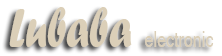
<style>
.page{position:relative;width:222px;height:56px;background:#ffffff}
.page>*{position:absolute;margin:0}
.t1{font:24px "Shruti";color:#dbcfb8;scale:0.72 1}
.t2{font:57.3px "ForteMT";color:#dbcfb8;scale:0.72 1}
</style>
<div class="page">
<p class="t1" style="left:9px;top:7px;width:205px;height:40px"><span class="t2">Lubaba </span>electronic</p>
</div>
